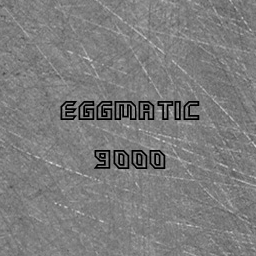
<style>
.page{position:relative;width:256px;height:256px}
.page>*{position:absolute;margin:0}
.t1{font:41px "HammerheadOutline";color:#000000}
</style>
<div class="page">
<p class="t1" style="left:60px;top:101px;width:140px;height:68px">Eggmatic 9000</p>
</div>
